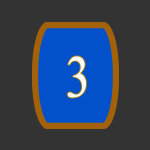
<style>
.page{position:relative;width:150px;height:150px;background:#333333}
.page>*{position:absolute;margin:0}
.t1{font:62.5px "TimesNewRomanPSMT";letter-spacing:0.1em;color:#ffffff;scale:0.75 1}
</style>
<div class="page">
<p class="t1" style="left:67px;top:56px;width:20px;height:42px">3</p>
</div>
